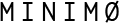
<style>
.page{position:relative;width:119px;height:23px;background:#ffffff}
.page>*{position:absolute;margin:0}
.t1{font:30px "Inconsolata-Regular";letter-spacing:0.2em;color:#000000;text-transform:uppercase}
</style>
<div class="page">
<p class="t1" style="left:0px;top:0px;width:119px;height:23px">minimø</p>
</div>
